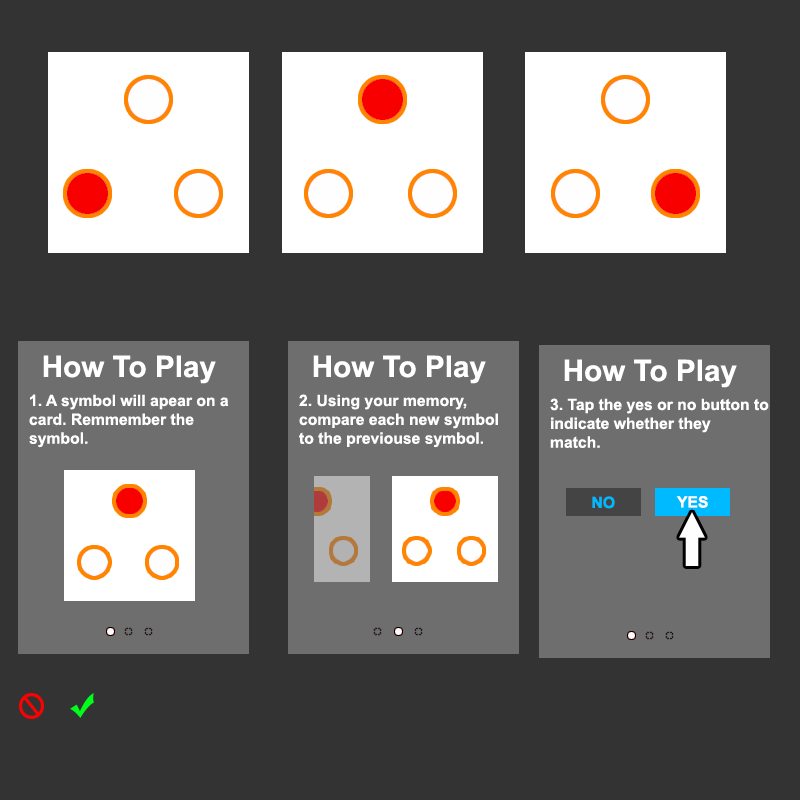
<style>
.page{position:relative;width:800px;height:800px;background:#333333}
.page>*{position:absolute;margin:0}
.t1{font:29.7px "Arial-BoldMT";color:#ffffff}
.t2{font:15.7px "Arial-BoldMT";color:#ffffff}
.t3{font:15.7px "Arial-BoldMT";color:#fefefe}
.t4{font:15.7px "Arial-BoldMT";color:#00baff}
</style>
<div class="page">
<p class="t1" style="left:43px;top:355px;width:173px;height:29px">How To Play</p>
<p class="t1" style="left:313px;top:355px;width:173px;height:29px">How To Play</p>
<p class="t1" style="left:564px;top:359px;width:173px;height:29px">How To Play</p>
<p class="t2" style="left:29px;top:394px;width:200px;height:54px">1. A symbol will apear on a<br>card. Remmember the<br>symbol.</p>
<p class="t3" style="left:299px;top:394px;width:199px;height:54px">2. Using your memory,<br>compare each new symbol<br>to the previouse symbol.</p>
<p class="t2" style="left:550px;top:398px;width:219px;height:50px">3. Tap the yes or no button to<br>indicate whether they <br>match.</p>
<p class="t4" style="left:592px;top:496px;width:23px;height:13px">NO</p>
<p class="t2" style="left:676px;top:496px;width:32px;height:12px">YES</p>
</div>
